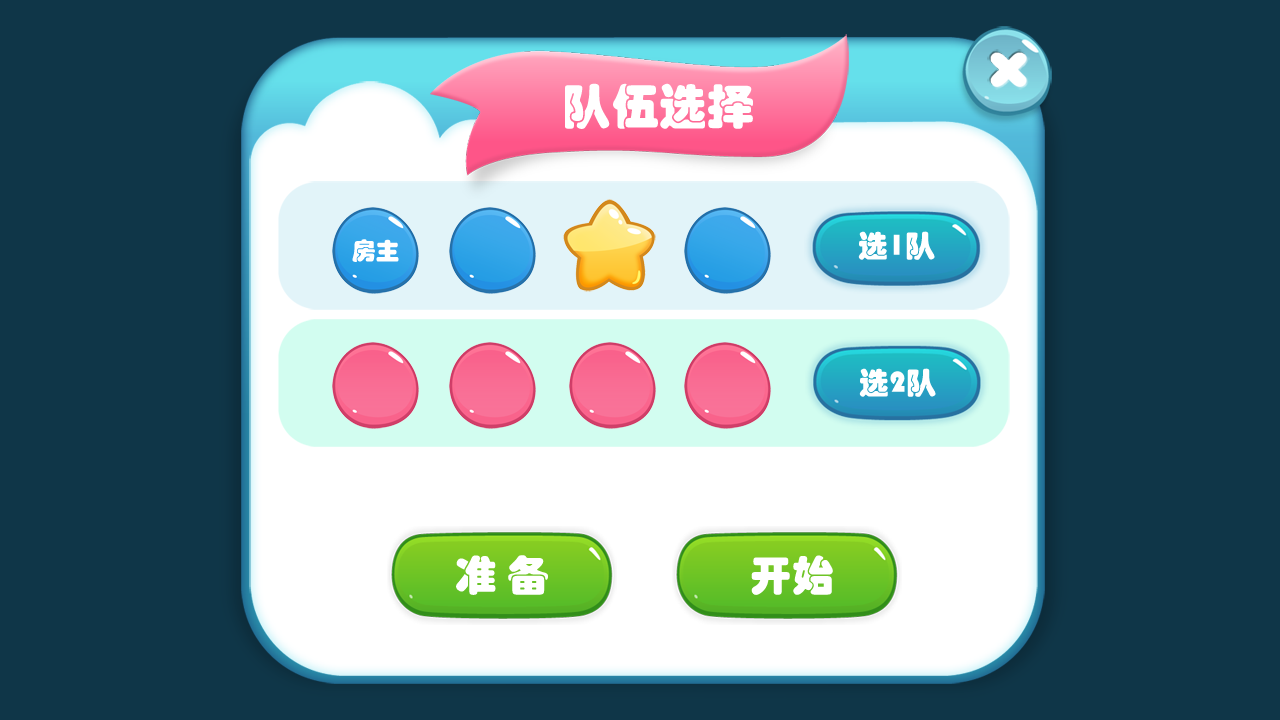
<style>
.page{position:relative;width:1280px;height:720px;background:#0f3648}
.page>*{position:absolute;margin:0}
.t1{font:48px "STHupo";color:#ffffff}
.t2{font:30px "STHupo";color:#ffffff}
.t3{font:24px "STHupo";color:#ffffff}
.t4{font:42px "STHupo";color:#ffffff}
</style>
<div class="page">
<p class="t1" style="left:565px;top:83px;width:188px;height:46px">队伍选择</p>
<p class="t2" style="left:858px;top:231px;width:77px;height:29px">选1队</p>
<p class="t3" style="left:352px;top:239px;width:47px;height:23px">房主</p>
<p class="t2" style="left:859px;top:368px;width:77px;height:29px">选2队</p>
<p class="t4" style="left:456px;top:555px;width:92px;height:40px">准 备</p>
<p class="t4" style="left:751px;top:555px;width:82px;height:40px">开始</p>
</div>
